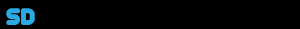
<style>
.page{position:relative;width:300px;height:29px;background:#000000}
.page>*{position:absolute;margin:0}
.t1{font:24px "CorpulentCapsBRK";color:#29aae3}
</style>
<div class="page">
<p class="t1" style="left:6px;top:8px;width:29px;height:17px">sd</p>
</div>
